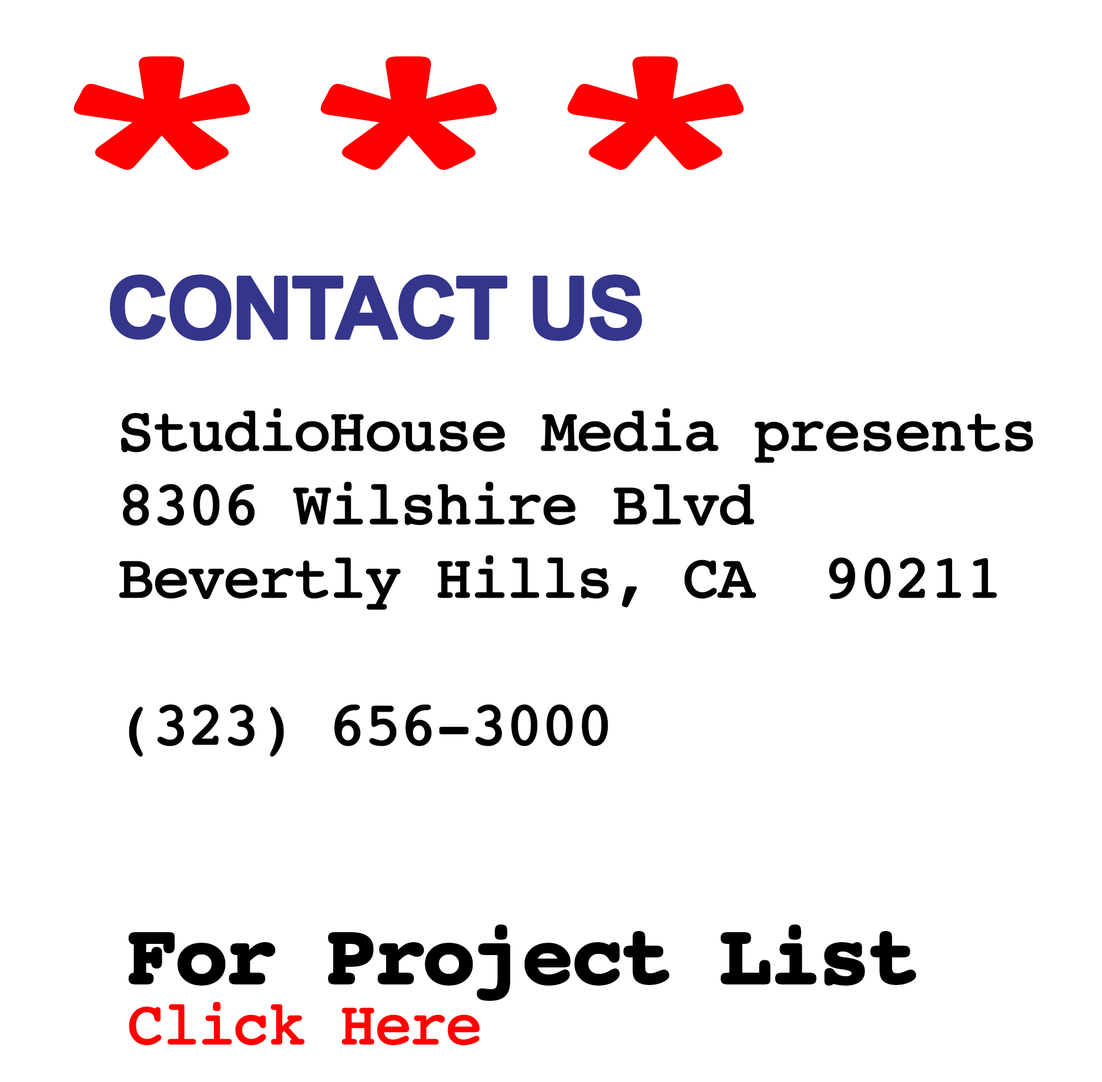
<style>
.page{position:relative;width:1102px;height:1082px;background:#ffffff}
.page>*{position:absolute;margin:0}
.t1{font:85.7px "Arial-BoldMT";letter-spacing:-0.05em;color:#34368c;font-weight:bold}
.t2{font:61.2px "Courier";letter-spacing:-0.05em;color:#000000;font-weight:bold}
.t3{font:85.7px "Courier-Bold";letter-spacing:-0.05em;color:#000000;font-weight:bold}
.t4{font:61.2px "Courier";letter-spacing:-0.05em;color:#ff0000;font-weight:bold}
</style>
<div class="page">
<p class="t1" style="left:109px;top:274px;width:533px;height:67px">CONTACT US</p>
<p class="t2" style="left:119px;top:408px;width:914px;height:349px">StudioHouse Media presents<br>8306 Wilshire Blvd<br>Bevertly Hills, CA  90211<br><br>(323) 656-3000</p>
<p class="t3" style="left:128px;top:925px;width:788px;height:76px">For Project List</p>
<p class="t4" style="left:129px;top:1002px;width:351px;height:44px">Click Here</p>
</div>
